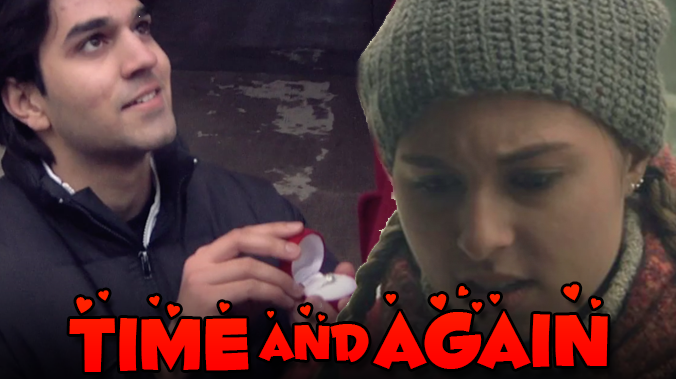
<style>
.page{position:relative;width:676px;height:379px}
.page>*{position:absolute;margin:0}
.t1{font:90px "FontdinerdotcomLuvable";color:#ff0d00}
.t2{font:90px "FontdinerdotcomLuvable";color:#ff0a00}
.t3{font:60px "FontdinerdotcomLuvable";color:#ff0c00}
</style>
<div class="page">
<p class="t1" style="left:69px;top:290px;width:180px;height:82px">time</p>
<p class="t2" style="left:373px;top:284px;width:235px;height:85px">again</p>
<p class="t3" style="left:258px;top:305px;width:111px;height:57px">and</p>
</div>
